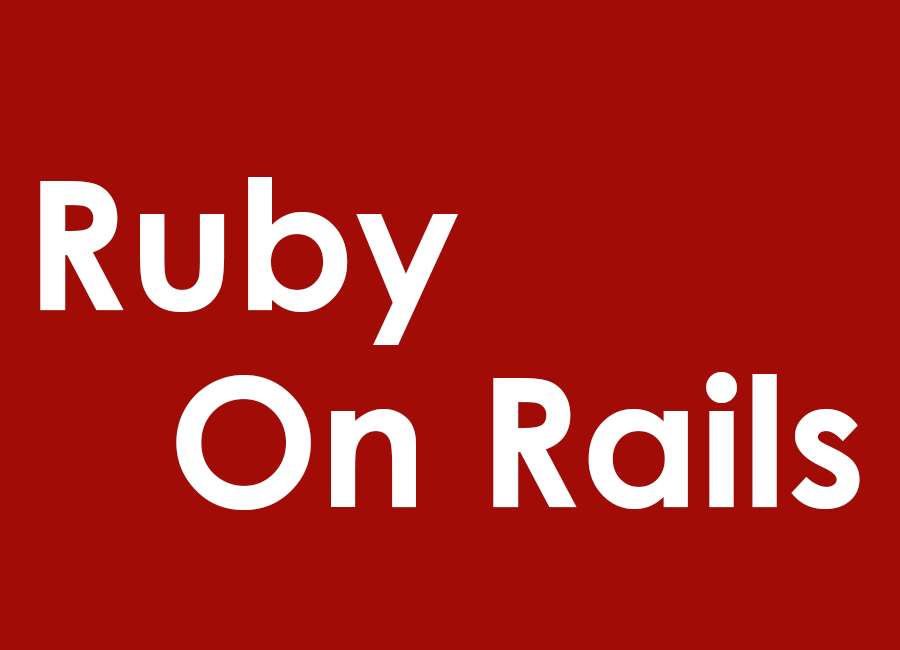
<style>
.page{position:relative;width:900px;height:650px;background:#a10d06}
.page>*{position:absolute;margin:0}
.t1{font:180px "CenturyGothic-Bold";color:#ffffff}
</style>
<div class="page">
<p class="t1" style="left:40px;top:177px;width:418px;height:168px">Ruby</p>
<p class="t1" style="left:176px;top:372px;width:684px;height:138px">On Rails</p>
</div>
